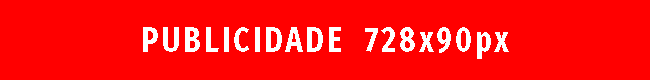
<style>
.page{position:relative;width:650px;height:80px;background:#ff0000}
.page>*{position:absolute;margin:0}
.t1{font:36px "FiraSans-Bold";letter-spacing:0.1em;color:#fefefe;scale:0.8 1}
</style>
<div class="page">
<p class="t1" style="left:143px;top:27px;width:366px;height:32px">PUBLICIDADE  728x90px</p>
</div>
